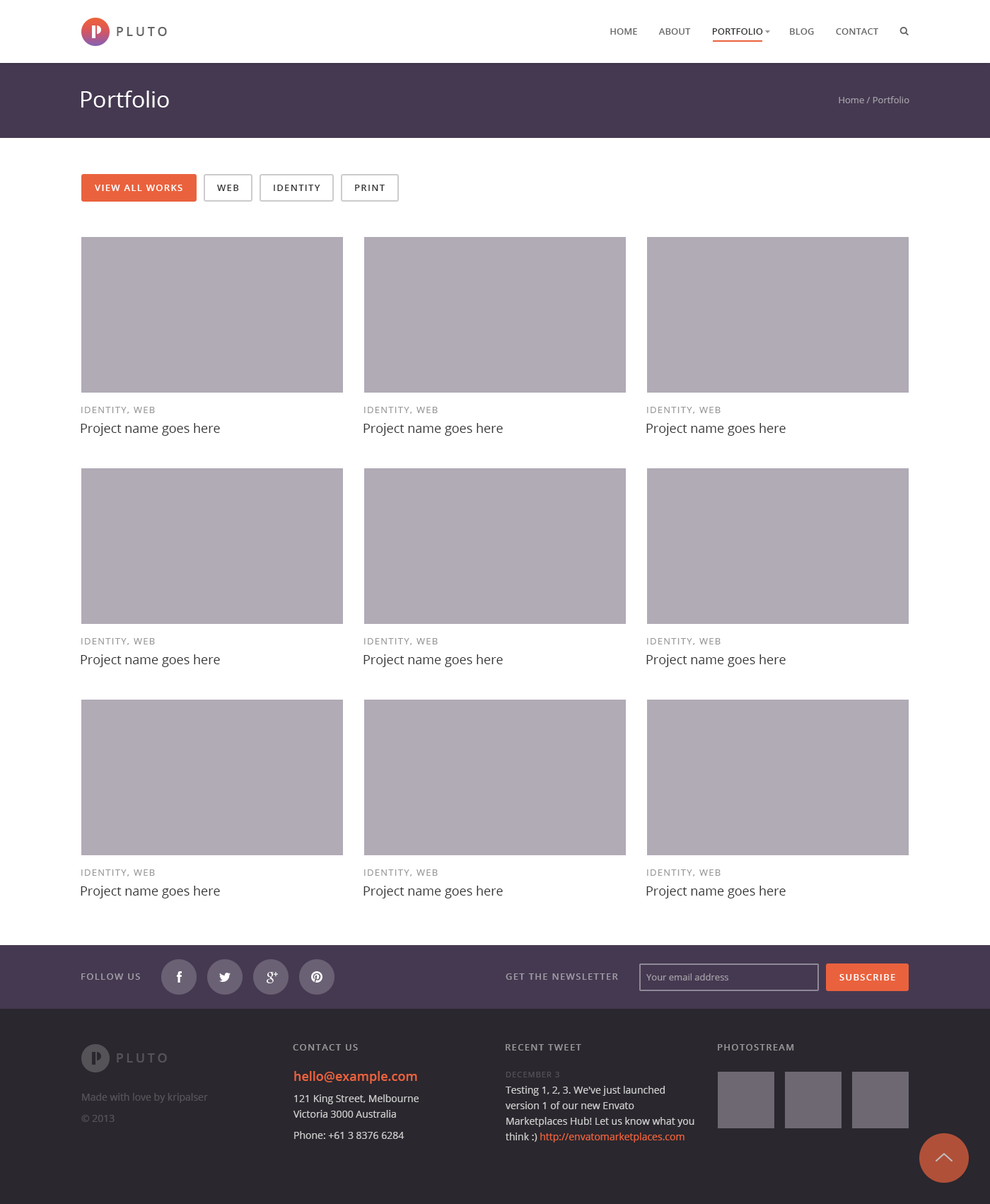
<style>
.page{position:relative;width:990px;height:1204px;background:#ffffff}
.page>*{position:absolute;margin:0}
.t1{font:12.7px "OpenSans-Semibold";letter-spacing:0.2em;color:#666666;text-transform:uppercase}
.t2{font:9.2px "OpenSans-Semibold";color:#666666;text-transform:uppercase}
.t3{font:9.2px "OpenSans-Semibold";color:#333333;text-transform:uppercase}
.t4{font:22.6px "OpenSans";color:#ffffff}
.t5{font:9.2px "OpenSans";color:#a09ca4}
.t6{font:9.2px "OpenSans-Semibold";letter-spacing:0.1em;color:#ffffff;text-transform:uppercase}
.t7{font:9.2px "OpenSans-Semibold";letter-spacing:0.1em;color:#333333;text-transform:uppercase}
.t8{font:9.2px "OpenSans";letter-spacing:0.1em;color:#999999;text-transform:uppercase}
.t9{font:12.7px "OpenSans";color:#333333}
.t10{font:9.2px "OpenSans-Semibold";letter-spacing:0.1em;color:#a09ca4;text-transform:uppercase}
.t11{font:9.2px "OpenSans-Semibold";letter-spacing:0.1em;color:#979698;text-transform:uppercase}
.t12{font:12.7px "OpenSans-Semibold";letter-spacing:0.2em;color:#555258;text-transform:uppercase}
.t13{font:9.9px/21.2px "OpenSans";color:#cccccc}
.t14{font:12.7px/17px "OpenSans-Semibold";color:#ea623d}
.t15{font:9.9px/15.6px "OpenSans";color:#cccccc}
.t16{font:7.8px "OpenSans";letter-spacing:0.1em;color:#545158;text-transform:uppercase}
.t17{font:9.9px/16.3px "OpenSans";color:#cccccc}
.t18{font:9.9px/15.6px "OpenSans";color:#ea623d}
.t19{font:9.9px/21.2px "OpenSans";color:#555258}
</style>
<div class="page">
<p class="t1" style="left:117px;top:27px;width:50px;height:9px">Pluto</p>
<p class="t2" style="left:610px;top:28px;width:269px;height:7px">Home         About         <span class="t3">Portfolio           </span>Blog         Contact</p>
<p class="t4" style="left:81px;top:91px;width:88px;height:17px">Portfolio</p>
<p class="t5" style="left:839px;top:96px;width:71px;height:7px">Home / Portfolio</p>
<p class="t6" style="left:95px;top:185px;width:88px;height:6px">View all works</p>
<p class="t7" style="left:217px;top:185px;width:22px;height:6px">Web</p>
<p class="t7" style="left:274px;top:185px;width:46px;height:6px">Identity</p>
<p class="t7" style="left:355px;top:185px;width:30px;height:6px">Print</p>
<p class="t8" style="left:81px;top:407px;width:74px;height:7px">Identity, Web</p>
<p class="t8" style="left:364px;top:407px;width:74px;height:7px">Identity, Web</p>
<p class="t8" style="left:647px;top:407px;width:74px;height:7px">Identity, Web</p>
<p class="t9" style="left:81px;top:423px;width:139px;height:13px">Project name goes here</p>
<p class="t9" style="left:364px;top:423px;width:139px;height:13px">Project name goes here</p>
<p class="t9" style="left:647px;top:423px;width:139px;height:13px">Project name goes here</p>
<p class="t8" style="left:81px;top:638px;width:74px;height:7px">Identity, Web</p>
<p class="t8" style="left:364px;top:638px;width:74px;height:7px">Identity, Web</p>
<p class="t8" style="left:647px;top:638px;width:74px;height:7px">Identity, Web</p>
<p class="t9" style="left:81px;top:654px;width:139px;height:13px">Project name goes here</p>
<p class="t9" style="left:364px;top:654px;width:139px;height:13px">Project name goes here</p>
<p class="t9" style="left:647px;top:654px;width:139px;height:13px">Project name goes here</p>
<p class="t8" style="left:81px;top:869px;width:74px;height:7px">Identity, Web</p>
<p class="t8" style="left:364px;top:869px;width:74px;height:7px">Identity, Web</p>
<p class="t8" style="left:647px;top:869px;width:74px;height:7px">Identity, Web</p>
<p class="t9" style="left:81px;top:886px;width:139px;height:12px">Project name goes here</p>
<p class="t9" style="left:364px;top:886px;width:139px;height:12px">Project name goes here</p>
<p class="t9" style="left:647px;top:886px;width:139px;height:12px">Project name goes here</p>
<p class="t10" style="left:81px;top:973px;width:59px;height:7px">Follow us</p>
<p class="t10" style="left:506px;top:973px;width:112px;height:7px">Get the newsletter</p>
<p class="t5" style="left:647px;top:973px;width:82px;height:7px">Your email address</p>
<p class="t6" style="left:840px;top:974px;width:56px;height:6px">Subscribe</p>
<p class="t11" style="left:293px;top:1044px;width:65px;height:7px">Contact us</p>
<p class="t11" style="left:506px;top:1044px;width:75px;height:7px">Recent tweet</p>
<p class="t11" style="left:718px;top:1044px;width:76px;height:7px">Photostream</p>
<p class="t12" style="left:117px;top:1053px;width:50px;height:10px">Pluto</p>
<p class="t13" style="left:294px;top:1071px;width:125px;height:68px"><span class="t14">hello@example.com<br></span>121 King Street, Melbourne <br><span class="t15">Victoria 3000 Australia<br></span>Phone: +61 3 8376 6284</p>
<p class="t16" style="left:506px;top:1072px;width:54px;height:5px">December 3</p>
<p class="t15" style="left:506px;top:1086px;width:189px;height:56px"><span class="t17">Testing 1, 2, 3. We've just launched </span>version 1 of our new Envato Marketplaces Hub! Let us know what you think :) <span class="t18">http://envatomarketplaces.com</span></p>
<p class="t19" style="left:81px;top:1093px;width:127px;height:29px">Made with love by kripalser<br>© 2013</p>
</div>
